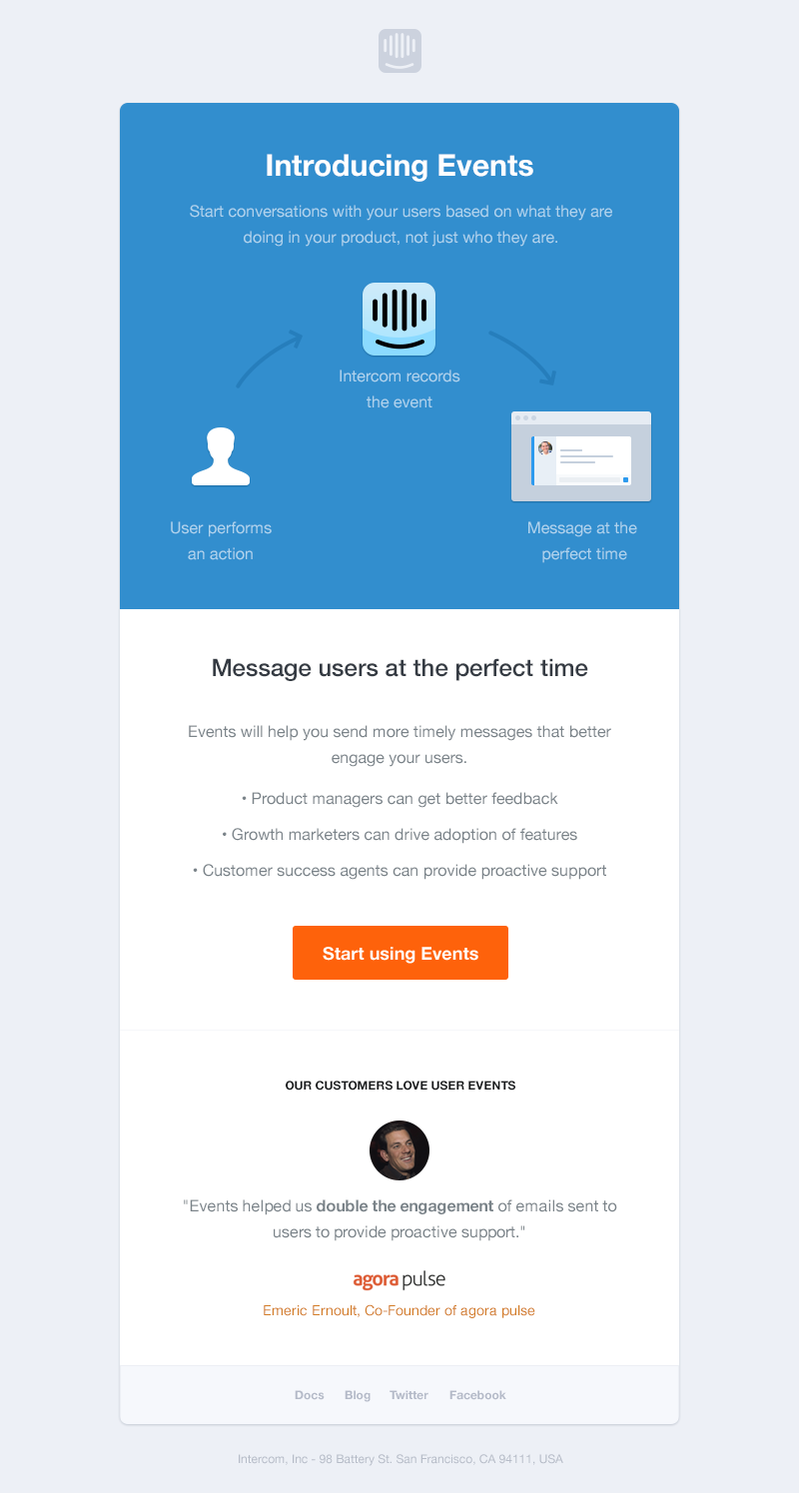
<style>
.page{position:relative;width:799px;height:1493px;background:#edf0f6}
.page>*{position:absolute;margin:0}
.t1{font:30px "HelveticaNeue-Bold";color:#ffffff}
.t2{font:16px/26px "HelveticaNeue";color:#afd3ed}
.t3{font:24px "HelveticaNeue-Medium";color:#353b43}
.t4{font:16px/26px "HelveticaNeue";color:#7a8389}
.t5{font:16px/35.9px "HelveticaNeue";color:#7a8389}
.t6{font:18px "HelveticaNeueLTPro-Bd";color:#ffffff}
.t7{font:12px "HelveticaNeue-Bold";color:#181a1c;text-transform:uppercase}
.t8{font:16px/26px "HelveticaNeue-Bold";color:#7a8389}
.t9{font:14px "HelveticaNeue";color:#d37c25}
.t10{font:12px "HelveticaNeue-Bold";color:#b4bac8}
.t11{font:12px "HelveticaNeue";color:#b6bcc8}
</style>
<div class="page">
<p class="t1" style="left:267px;top:154px;width:266px;height:28px">Introducing Events</p>
<p class="t2" style="left:190px;top:205px;width:422px;height:42px;text-align:center">Start conversations with your users based on what they are doing in your product, not just who they are.</p>
<p class="t2" style="left:339px;top:369px;width:121px;height:39px;text-align:center">Intercom records<br>the event</p>
<p class="t2" style="left:171px;top:521px;width:101px;height:39px;text-align:center">User performs<br>an action</p>
<p class="t2" style="left:528px;top:521px;width:109px;height:42px;text-align:center">Message at the <br>perfect time</p>
<p class="t3" style="left:213px;top:658px;width:375px;height:23px">Message users at the perfect time</p>
<p class="t4" style="left:189px;top:725px;width:422px;height:42px;text-align:center">Events will help you send more timely messages that better engage your users.</p>
<p class="t5" style="left:193px;top:792px;width:413px;height:88px;text-align:center">• Product managers can get better feedback<br>• Growth marketers can drive adoption of features<br>• Customer success agents can provide proactive support</p>
<p class="t6" style="left:323px;top:947px;width:155px;height:17px">Start using Events</p>
<p class="t7" style="left:286px;top:1080px;width:229px;height:10px">OUR CUSTOMERS LOVE USER EVENTS</p>
<p class="t4" style="left:184px;top:1199px;width:433px;height:42px;text-align:center">"Events helped us <span class="t8">double the engagement </span>of emails sent to users to provide proactive support."</p>
<p class="t9" style="left:264px;top:1304px;width:271px;height:14px">Emeric Ernoult, Co-Founder of agora pulse</p>
<p class="t10" style="left:295px;top:1390px;width:30px;height:10px">Docs</p>
<p class="t10" style="left:344px;top:1390px;width:26px;height:12px">Blog</p>
<p class="t10" style="left:389px;top:1390px;width:39px;height:10px">Twitter</p>
<p class="t10" style="left:449px;top:1390px;width:57px;height:10px">Facebook</p>
<p class="t11" style="left:239px;top:1454px;width:324px;height:12px">Intercom, Inc - 98 Battery St. San Francisco, CA 94111, USA</p>
</div>
